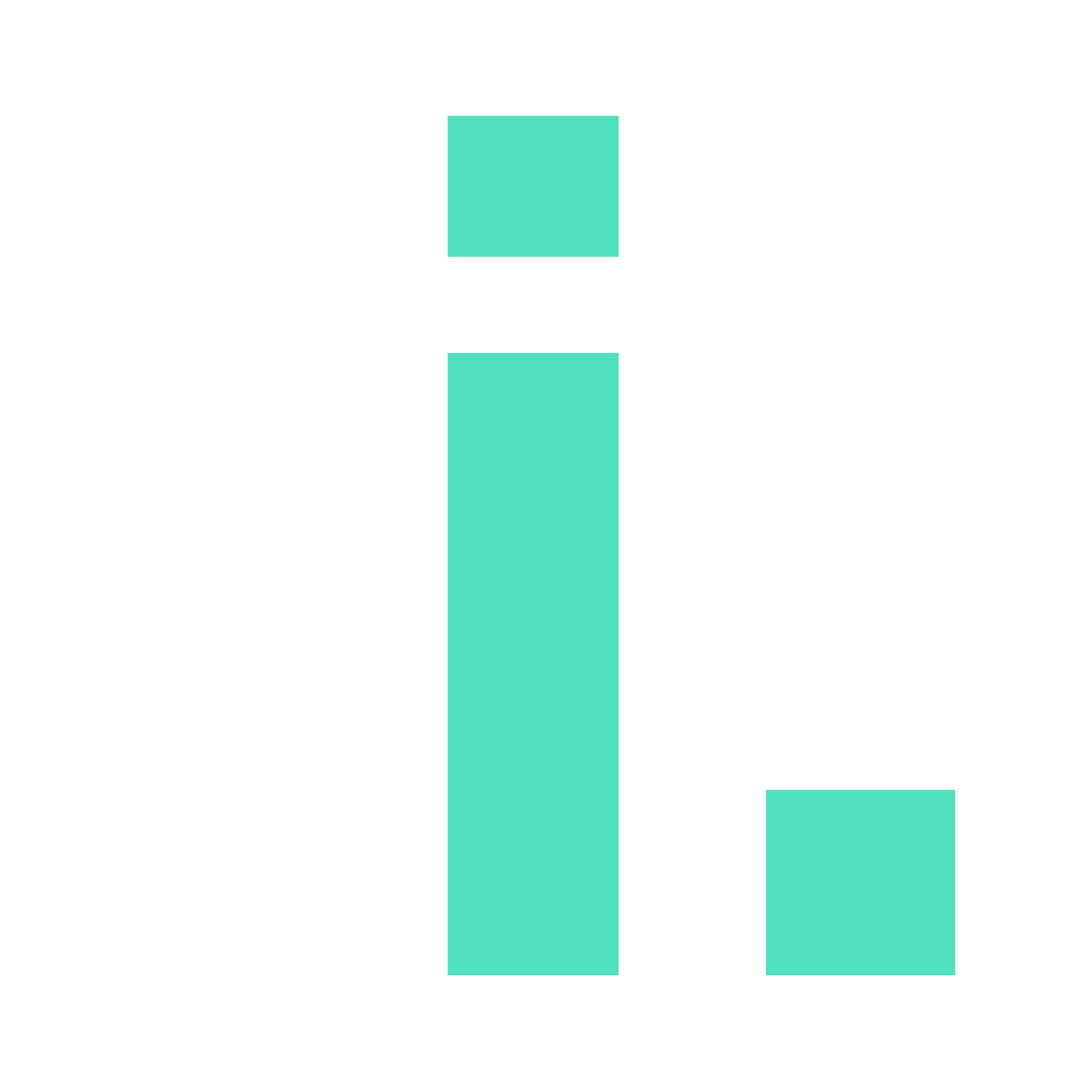
<style>
.page{position:relative;width:1092px;height:1092px;background:#ffffff}
.page>*{position:absolute;margin:0}
.t1{font:1203.7px "HelveticaNeue-Bold";letter-spacing:0.005em;color:#50e0bf}
</style>
<div class="page">
<p class="t1" style="left:447px;top:116px;width:509px;height:859px">i.</p>
</div>
